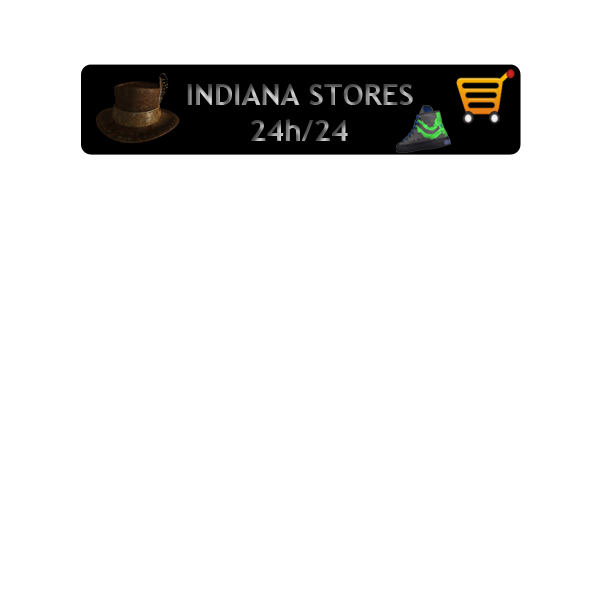
<style>
.page{position:relative;width:600px;height:600px;background:#ffffff}
.page>*{position:absolute;margin:0}
.t1{font:30px/18px "TrebuchetMS-Bold"}
</style>
<div class="page">
<p class="t1" style="left:187px;top:84px;width:226px;height:57px">INDIANA STORES<br><br>       24h/24</p>
</div>
